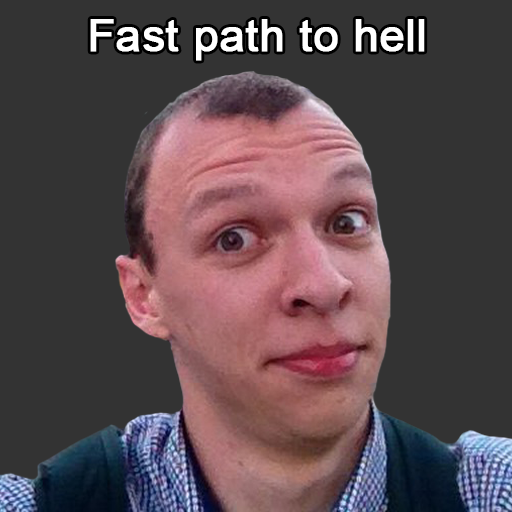
<style>
.page{position:relative;width:512px;height:512px;background:#333333}
.page>*{position:absolute;margin:0}
.t1{font:45px "ArialMT";color:#ffffff;font-weight:bold}
</style>
<div class="page">
<p class="t1" style="left:90px;top:19px;width:335px;height:42px">Fast path to hell</p>
</div>
